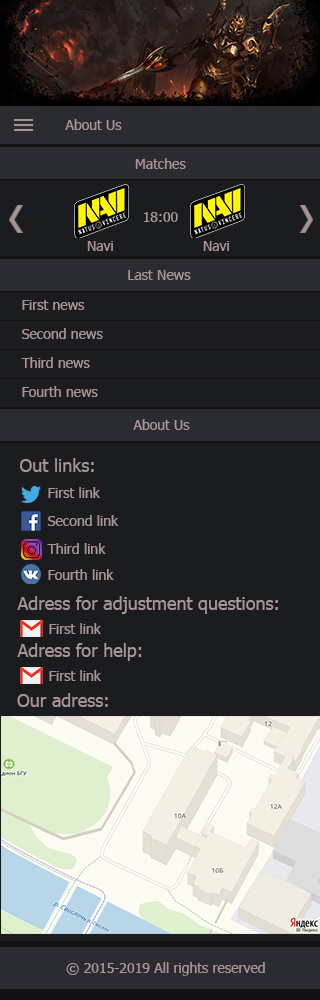
<style>
.page{position:relative;width:320px;height:1000px;background:#1b1c20}
.page>*{position:absolute;margin:0}
.t1{font:14px "Tahoma";color:#a89494}
.t2{font:18px "Tahoma";color:#a89494}
</style>
<div class="page">
<p class="t1" style="left:65px;top:119px;width:57px;height:11px">About Us</p>
<p class="t1" style="left:135px;top:158px;width:51px;height:11px">Matches</p>
<p class="t1" style="left:144px;top:212px;width:34px;height:10px">18:00</p>
<p class="t1" style="left:87px;top:241px;width:26px;height:10px">Navi</p>
<p class="t1" style="left:203px;top:241px;width:26px;height:10px">Navi</p>
<p class="t1" style="left:128px;top:270px;width:63px;height:10px">Last News</p>
<p class="t1" style="left:22px;top:300px;width:63px;height:10px">First news</p>
<p class="t1" style="left:22px;top:328px;width:81px;height:11px">Second news</p>
<p class="t1" style="left:21px;top:357px;width:69px;height:11px">Third news</p>
<p class="t1" style="left:22px;top:386px;width:76px;height:11px">Fourth news</p>
<p class="t1" style="left:133px;top:419px;width:57px;height:11px">About Us</p>
<p class="t2" style="left:20px;top:458px;width:74px;height:14px">Out links:</p>
<p class="t1" style="left:48px;top:487px;width:52px;height:11px">First link</p>
<p class="t1" style="left:48px;top:515px;width:71px;height:11px">Second link</p>
<p class="t1" style="left:47px;top:543px;width:59px;height:11px">Third link</p>
<p class="t1" style="left:48px;top:569px;width:66px;height:11px">Fourth link</p>
<p class="t2" style="left:17px;top:596px;width:261px;height:18px">Adress for adjustment questions:</p>
<p class="t1" style="left:49px;top:623px;width:52px;height:11px">First link</p>
<p class="t2" style="left:17px;top:643px;width:125px;height:18px">Adress for help:</p>
<p class="t1" style="left:49px;top:670px;width:52px;height:11px">First link</p>
<p class="t2" style="left:17px;top:693px;width:91px;height:14px">Our adress:</p>
<p class="t1" style="left:66px;top:962px;width:199px;height:14px">© 2015-2019 All rights reserved</p>
</div>
